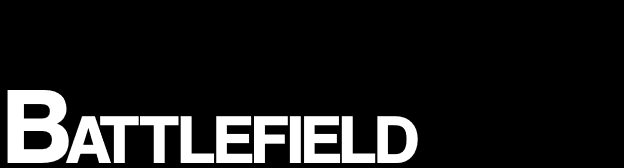
<style>
.page{position:relative;width:624px;height:168px;background:#000000}
.page>*{position:absolute;margin:0}
.t1{font:110px "CoolveticaRg-Bold";color:#ffffff;font-variant:small-caps}
</style>
<div class="page">
<p class="t1" style="left:7px;top:89px;width:411px;height:74px">Battlefield</p>
</div>
